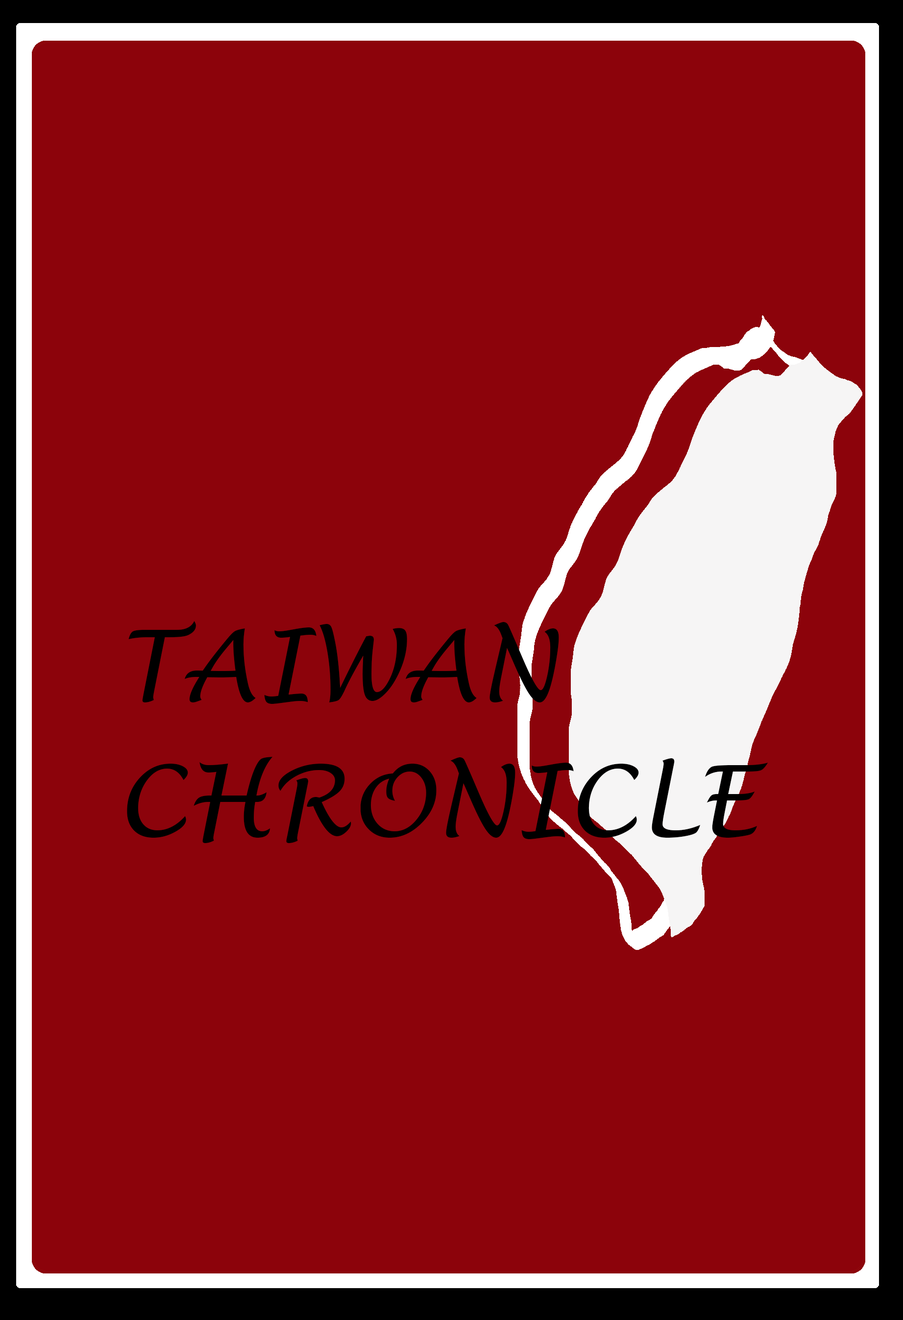
<style>
.page{position:relative;width:903px;height:1320px;background:#8c030b}
.page>*{position:absolute;margin:0}
.t1{font:98px "LucidaHandwriting-Italic";color:#000000}
.t2{font:81px "LucidaHandwriting-Italic";color:#000000}
</style>
<div class="page">
<p class="t1" style="left:127px;top:621px;width:642px;height:222px"><span class="t2"><br></span>TAIWAN<br>CHRONICLE</p>
</div>
